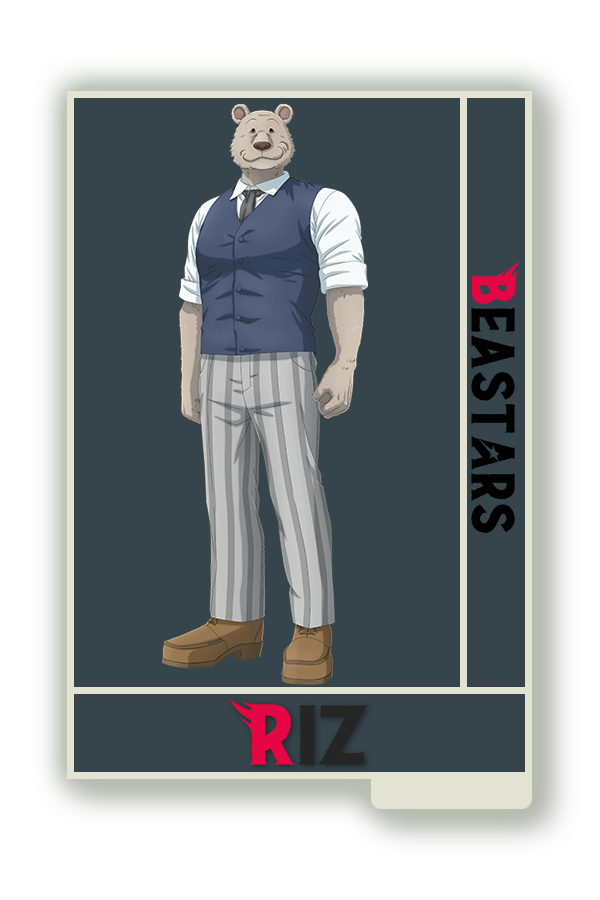
<style>
.page{position:relative;width:600px;height:900px;background:#36454b}
.page>*{position:absolute;margin:0}
.t1{font:48.8px "BEAST";color:#000000}
.t2{font:48.8px "BEAST";color:#e60646}
.t3{font:67px "BEAST";color:#252525;scale:1.12 1}
.t4{font:67px "BEAST";color:#e60646;scale:1.12 1}
</style>
<div class="page">
<p class="t1" style="left:471px;top:262px;width:50px;height:271px;rotate:90deg"><span class="t2">B</span>east@rs</p>
<p class="t3" style="left:230px;top:698px;width:138px;height:67px"><span class="t4">R</span>iz</p>
</div>
